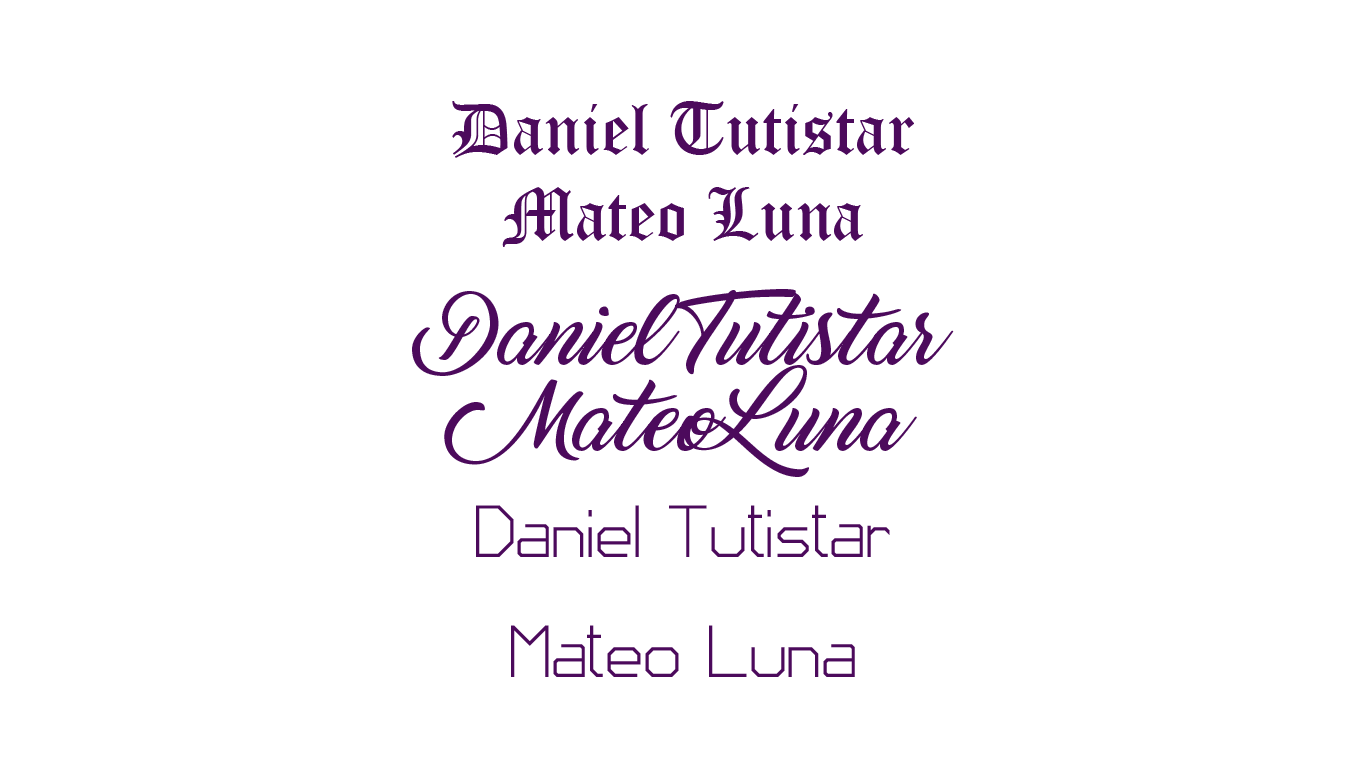
<style>
.page{position:relative;width:1366px;height:768px;background:#ffffff}
.page>*{position:absolute;margin:0}
.t1{font:72px "OldEnglishTextMT";color:#4c0a5c}
.t2{font:72px "Marguerite";color:#4c0a5c}
.t3{font:100px "JD-Code";color:#4c0a5c}
</style>
<div class="page">
<p class="t1" style="left:452px;top:101px;width:462px;height:146px;text-align:center">Daniel Tutistar<br>Mateo Luna</p>
<p class="t2" style="left:412px;top:289px;width:542px;height:188px;text-align:center">Daniel Tutistar<br>Mateo Luna</p>
<p class="t3" style="left:476px;top:505px;width:414px;height:172px;text-align:center">Daniel Tutistar<br>Mateo Luna</p>
</div>
